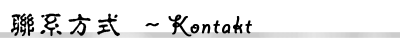
<style>
.page{position:relative;width:400px;height:50px;background:#ffffff}
.page>*{position:absolute;margin:0}
.t1{font:27px "GiddyupStd";letter-spacing:0.06em;color:#000000;font-weight:bold}
.t2{font:27px "¾­µä·±µ­¹Å Regular";letter-spacing:0.06em;color:#000000}
.t3{font:27px "¾­µä·±µ­¹Å Regular";letter-spacing:0.06em;color:#000000;font-weight:bold}
</style>
<div class="page">
<p class="t1" style="left:10px;top:13px;width:242px;height:24px"><span class="t2">联系方式 </span><span class="t3">～</span>Kontakt</p>
</div>
